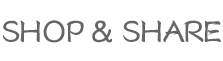
<style>
.page{position:relative;width:223px;height:61px;background:#ffffff}
.page>*{position:absolute;margin:0}
.t1{font:30px "FZSXSLKJW--GB1-0";letter-spacing:-0.025em;color:#656565;text-transform:uppercase}
</style>
<div class="page">
<p class="t1" style="left:2px;top:20px;width:219px;height:23px">Shop &amp; SHARE</p>
</div>
